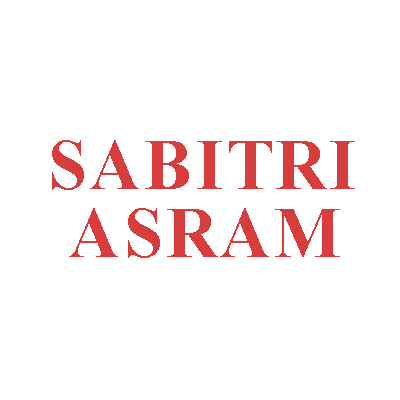
<style>
.page{position:relative;width:400px;height:400px;background:#ffffff}
.page>*{position:absolute;margin:0}
.t1{font:122.4px "TimesNewRomanPS-BoldMT";letter-spacing:0.06em;color:#d73d3d;text-transform:uppercase}
</style>
<div class="page">
<p class="t1" style="left:52px;top:140px;width:303px;height:50px">sabitri</p>
<p class="t1" style="left:69px;top:208px;width:271px;height:50px">asram</p>
</div>
